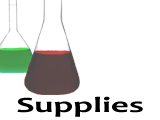
<style>
.page{position:relative;width:160px;height:120px;background:#ffffff}
.page>*{position:absolute;margin:0}
.t1{font:22px "Candara-Bold";color:#000000;scale:1.6 1}
</style>
<div class="page">
<p class="t1" style="left:17px;top:96px;width:126px;height:21px">Supplies</p>
</div>
